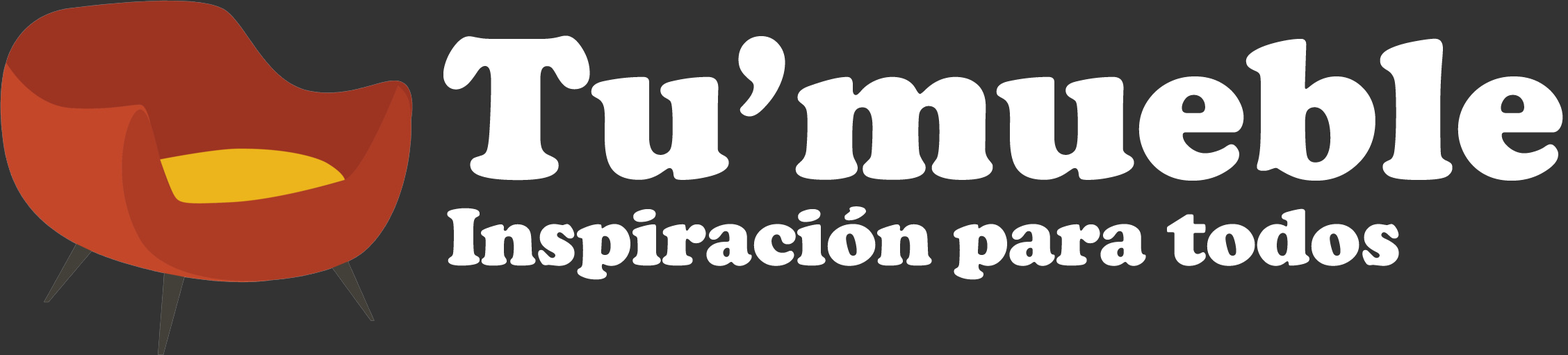
<style>
.page{position:relative;width:1568px;height:355px;background:#333333}
.page>*{position:absolute;margin:0}
.t1{font:208.5px "CooperBlack";color:#ffffff}
.t2{font:83.4px "CooperBlack";color:#ffffff}
</style>
<div class="page">
<p class="t1" style="left:443px;top:35px;width:1120px;height:146px">Tu’mueble</p>
<p class="t2" style="left:447px;top:206px;width:952px;height:74px">Inspiración para todos</p>
</div>
